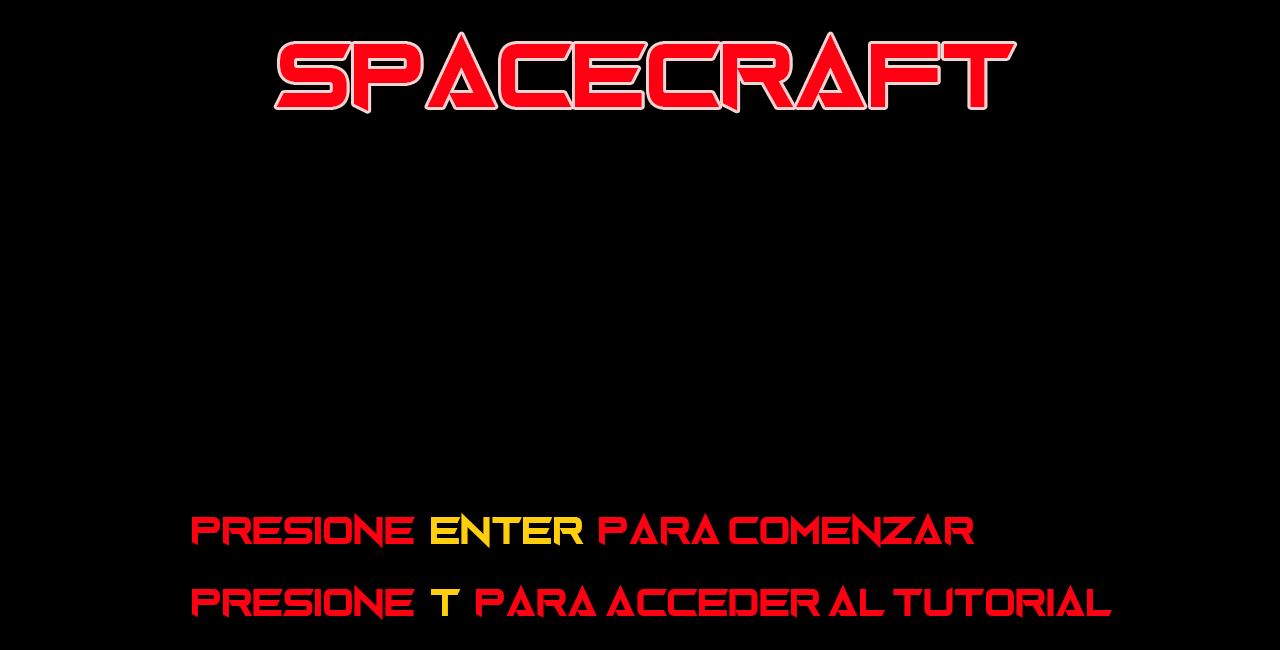
<style>
.page{position:relative;width:1280px;height:650px;background:#000000}
.page>*{position:absolute;margin:0}
.t1{font:72px "Gravedigger";color:#ff0012}
.t2{font:30px "Gravedigger";color:#ff0012}
.t3{font:30px "Gravedigger";color:#ffcf0e}
</style>
<div class="page">
<p class="t1" style="left:276px;top:34px;width:739px;height:77px">SpaceCraft</p>
<p class="t2" style="left:192px;top:513px;width:920px;height:107px">Presione  <span class="t3">Enter</span>  para comenzar<br><br>Presione  <span class="t3">T</span>  para acceder al tutorial</p>
</div>
